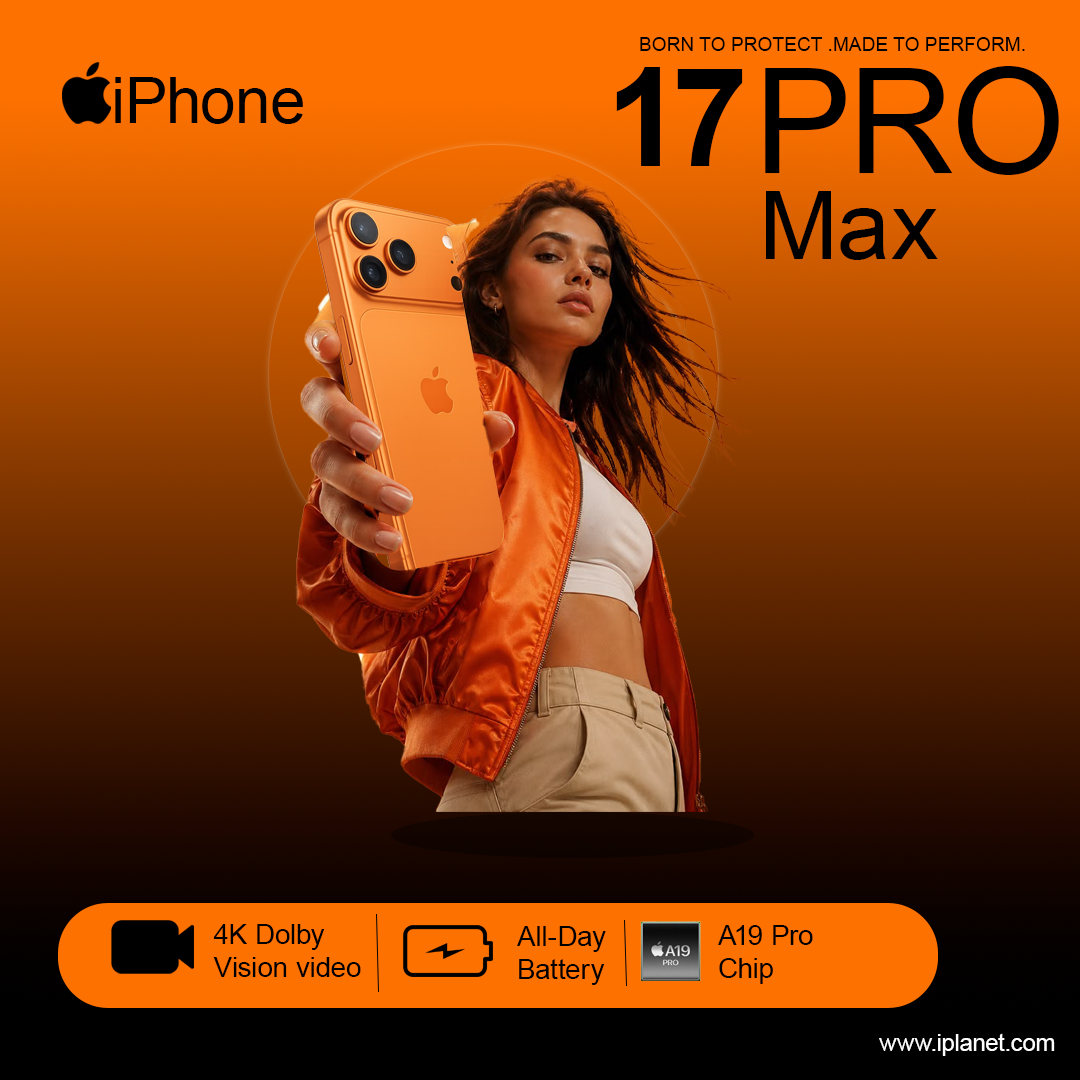
<style>
.page{position:relative;width:1080px;height:1080px}
.page>*{position:absolute;margin:0}
.t1{font:19.2px "ArialMT";color:#000000}
.t2{font:63.5px "ArialMT";letter-spacing:0.01em;color:#000000}
.t3{font:136.9px "Arial-BoldMT";letter-spacing:0.01em;color:#000000}
.t4{font:147.2px "ArialMT";letter-spacing:0.01em;color:#000000}
.t5{font:95.2px "ArialMT";letter-spacing:0.01em;color:#000000}
.t6{font:27.5px "ArialMT";letter-spacing:0.01em;color:#000000}
.t7{font:23.5px "ArialMT";letter-spacing:0.01em;color:#fefefe}
</style>
<div class="page">
<p class="t1" style="left:640px;top:37px;width:385px;height:14px">BORN TO PROTECT .MADE TO PERFORM.</p>
<p class="t2" style="left:115px;top:77px;width:188px;height:47px">iPhone</p>
<p class="t3" style="left:616px;top:67px;width:127px;height:99px">17</p>
<p class="t4" style="left:765px;top:66px;width:294px;height:109px">PRO</p>
<p class="t5" style="left:766px;top:191px;width:172px;height:69px">Max</p>
<p class="t6" style="left:213px;top:924px;width:148px;height:53px">4K Dolby<br>Vision video</p>
<p class="t6" style="left:517px;top:926px;width:89px;height:59px">All-Day<br>Battery</p>
<p class="t6" style="left:718px;top:925px;width:95px;height:59px">A19 Pro<br>Chip</p>
<p class="t7" style="left:879px;top:1033px;width:176px;height:23px">www.iplanet.com</p>
</div>
